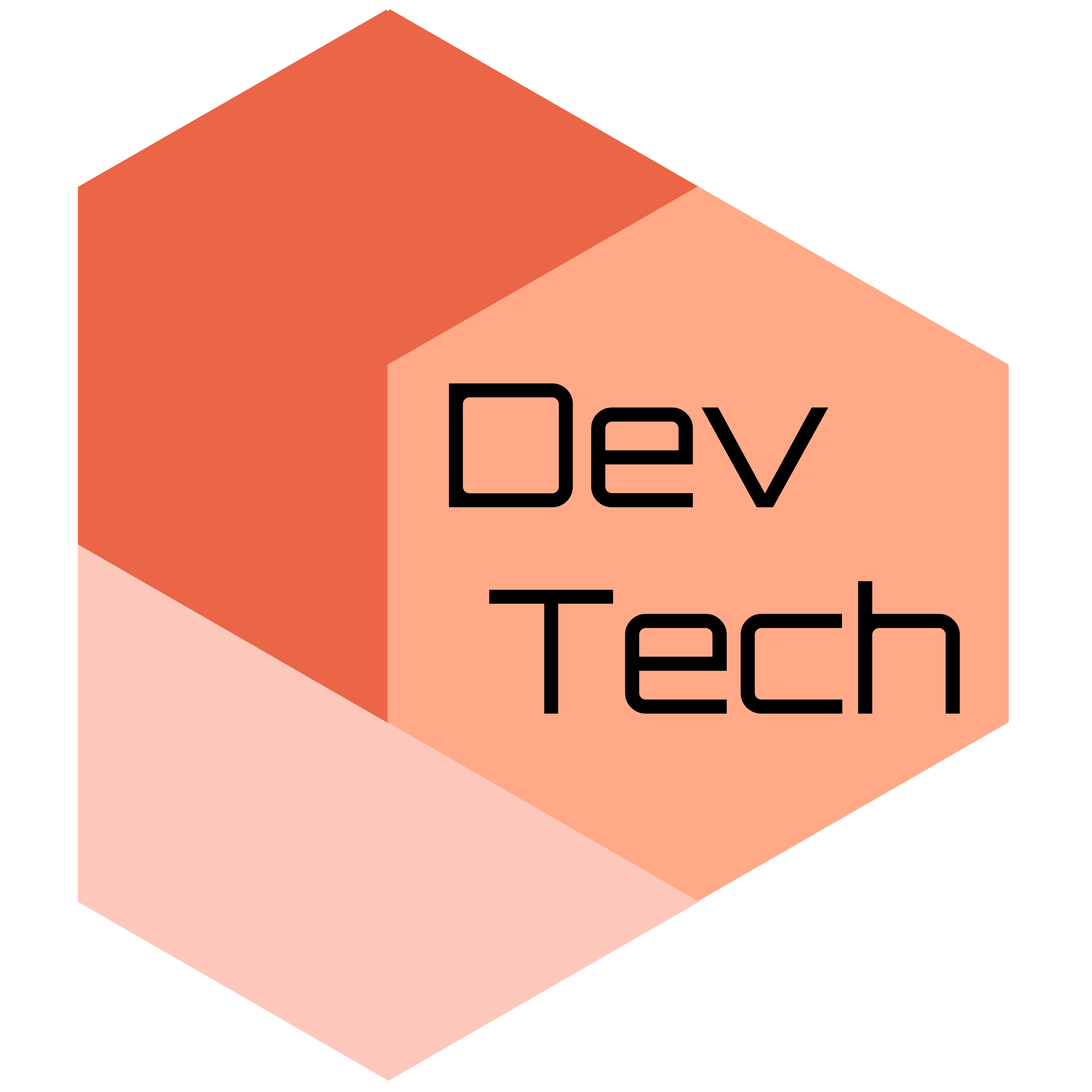
<style>
.page{position:relative;width:1092px;height:1092px;background:#ffffff}
.page>*{position:absolute;margin:0}
.t1{font:172px "Orbitron-Regular";color:#000000}
</style>
<div class="page">
<p class="t1" style="left:449px;top:383px;width:511px;height:331px">Dev<br> Tech</p>
</div>
